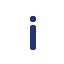
<style>
.page{position:relative;width:64px;height:64px;background:#ffffff}
.page>*{position:absolute;margin:0}
.t1{font:48px "ArialRoundedMTBold";color:#273373}
</style>
<div class="page">
<p class="t1" style="left:30px;top:16px;width:6px;height:34px">i</p>
</div>
